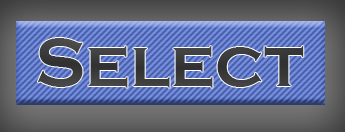
<style>
.page{position:relative;width:345px;height:132px}
.page>*{position:absolute;margin:0}
.t1{font:70px "CopperplateGothic-Bold";color:#3e3e3e}
</style>
<div class="page">
<p class="t1" style="left:37px;top:38px;width:267px;height:50px">Select</p>
</div>
